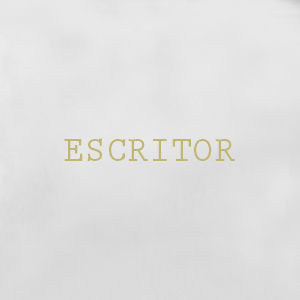
<style>
.page{position:relative;width:300px;height:300px}
.page>*{position:absolute;margin:0}
.t1{font:36px "PrestigeEliteStd-Bd";color:#c1b774}
</style>
<div class="page">
<p class="t1" style="left:64px;top:138px;width:171px;height:23px">ESCRITOR</p>
</div>
